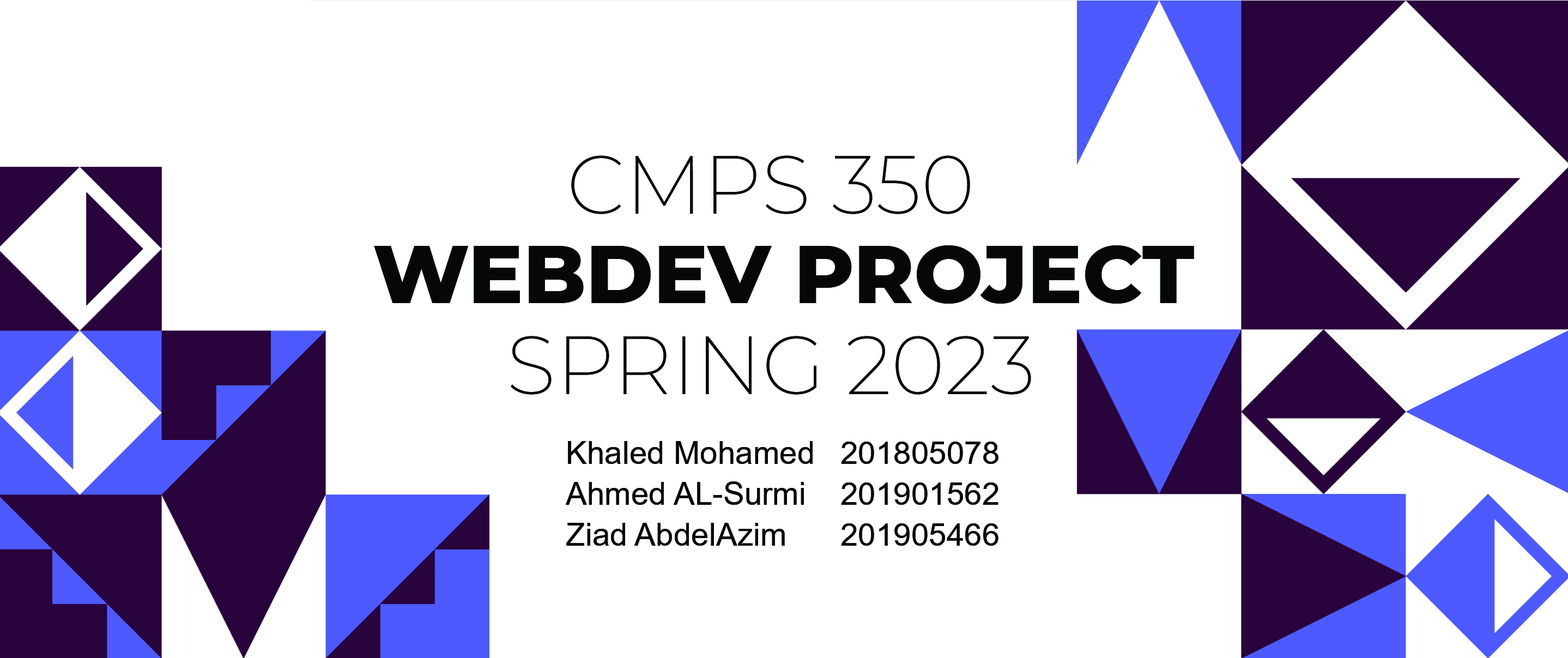
<style>
.page{position:relative;width:1568px;height:658px;background:#ffffff}
.page>*{position:absolute;margin:0}
.t1{font:81.8px "Montserrat-ExtraLight";color:#060808}
.t2{font:81.8px "Montserrat-ExtraBold";color:#060808}
.t3{font:31.8px/40.9px "ArialMT";color:#060808}
</style>
<div class="page">
<p class="t1" style="left:571px;top:155px;width:399px;height:59px">CMPS 350</p>
<p class="t2" style="left:374px;top:245px;width:820px;height:59px">WEBDEV PROJECT</p>
<p class="t1" style="left:511px;top:336px;width:520px;height:59px">SPRING 2023</p>
<p class="t3" style="left:566px;top:441px;width:432px;height:105px;text-align:center">Khaled Mohamed  201805078<br>Ahmed AL-Surmi  201901562<br>Ziad AbdelAzim    201905466</p>
</div>
